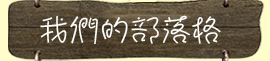
<style>
.page{position:relative;width:270px;height:61px}
.page>*{position:absolute;margin:0}
.t1{font:30.5px "DFLianLian-W4-HK-BF";color:#fdfdfc}
</style>
<div class="page">
<p class="t1" style="left:40px;top:15px;width:181px;height:29px">我們的部落格</p>
</div>
